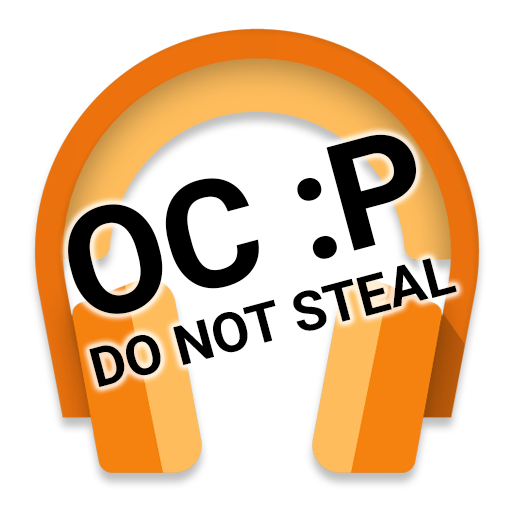
<style>
.page{position:relative;width:512px;height:512px;background:#ffffff}
.page>*{position:absolute;margin:0}
.t1{font:55px "Roboto-Bold";color:#000000;text-transform:uppercase}
.t2{font:150px "Roboto-Bold";color:#000000}
</style>
<div class="page">
<p class="t1" style="left:68px;top:134px;width:389px;height:253px;rotate:-15deg"><span class="t2">OC :P<br></span>do not steal</p>
</div>
